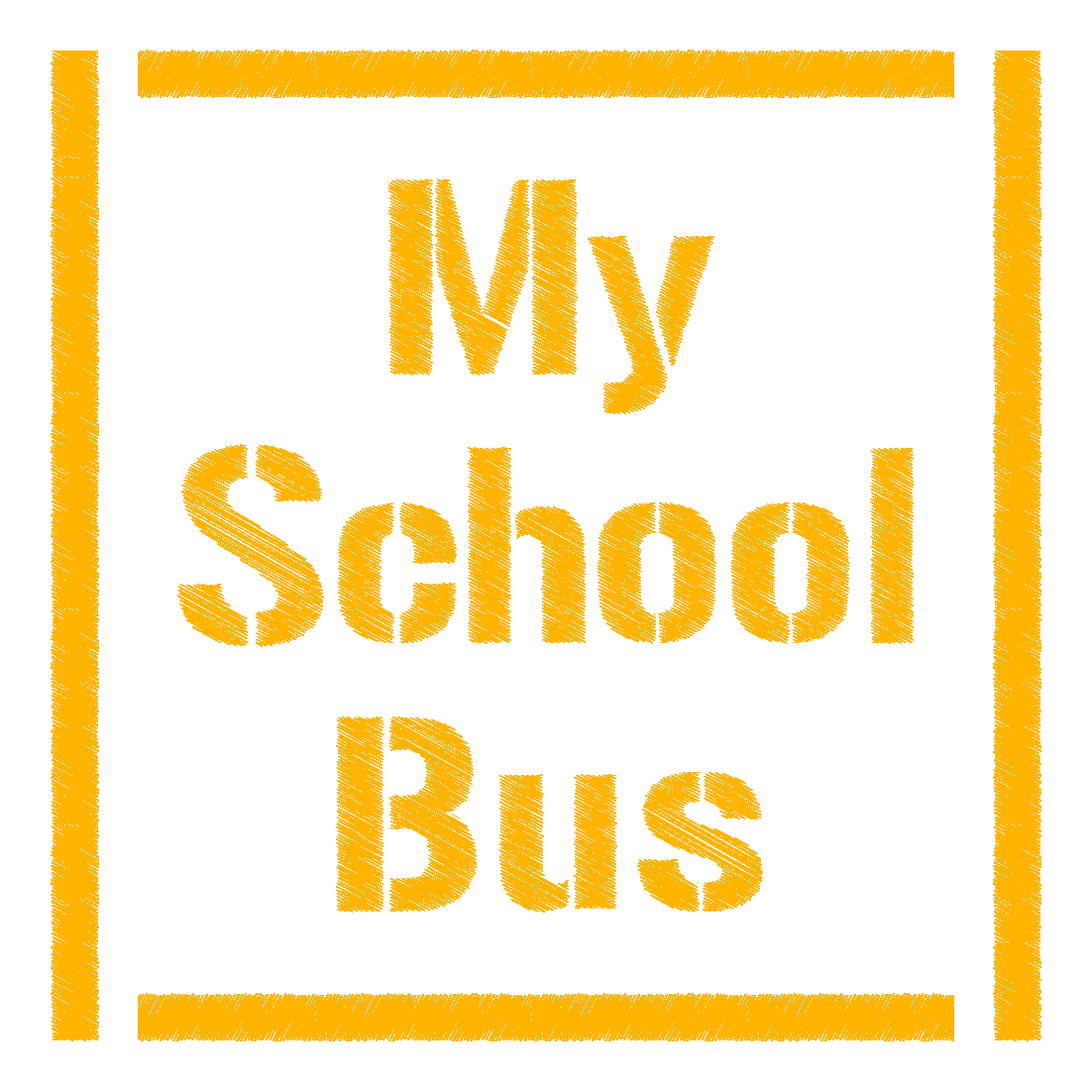
<style>
.page{position:relative;width:1092px;height:1092px;background:#ffffff}
.page>*{position:absolute;margin:0}
.t1{font:275.3px/268.4px "UrbanSketch";color:#ffb400}
</style>
<div class="page">
<p class="t1" style="left:177px;top:179px;width:737px;height:734px;text-align:center">My<br>School<br>Bus</p>
</div>
